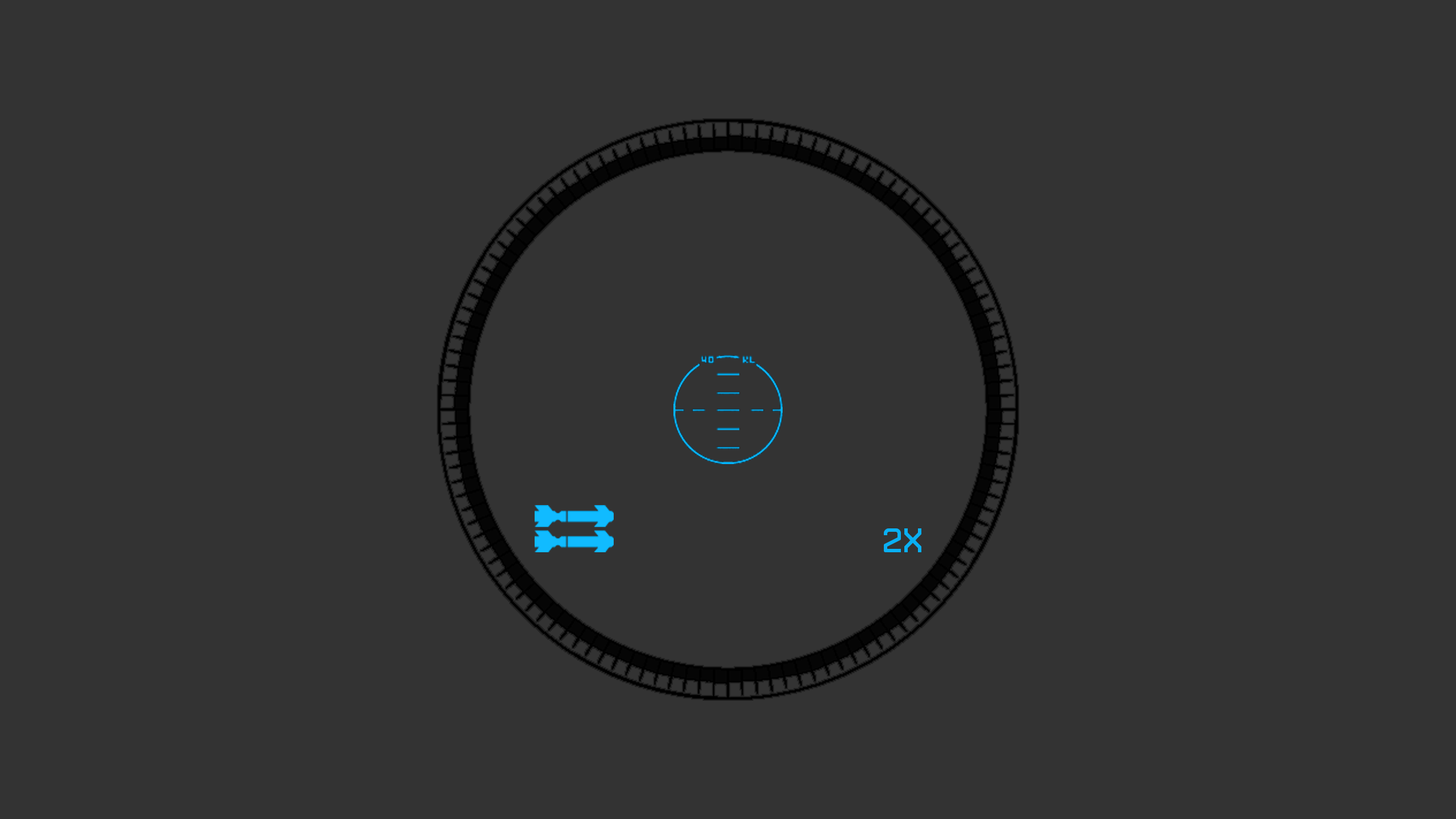
<style>
.page{position:relative;width:1456px;height:819px;background:#333333}
.page>*{position:absolute;margin:0}
.t1{font:34.1px "Arame";color:#09b0f4}
</style>
<div class="page">
<p class="t1" style="left:884px;top:528px;width:37px;height:24px">2XX</p>
</div>
